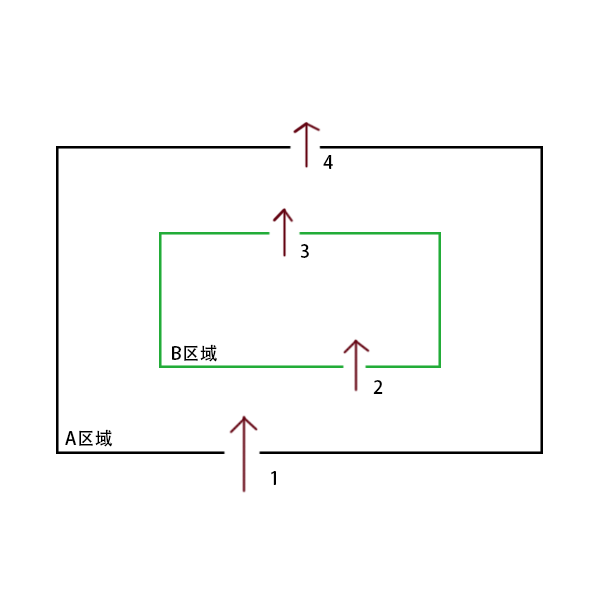
<style>
.page{position:relative;width:600px;height:600px;background:#ffffff}
.page>*{position:absolute;margin:0}
.t1{font:18px "AdobeHeitiStd-Regular";color:#000000}
</style>
<div class="page">
<p class="t1" style="left:323px;top:155px;width:10px;height:14px">4</p>
<p class="t1" style="left:300px;top:244px;width:9px;height:14px">3</p>
<p class="t1" style="left:172px;top:344px;width:45px;height:18px">B区域</p>
<p class="t1" style="left:373px;top:380px;width:10px;height:14px">2</p>
<p class="t1" style="left:65px;top:429px;width:48px;height:18px">A区域</p>
<p class="t1" style="left:271px;top:471px;width:5px;height:14px">1</p>
</div>
